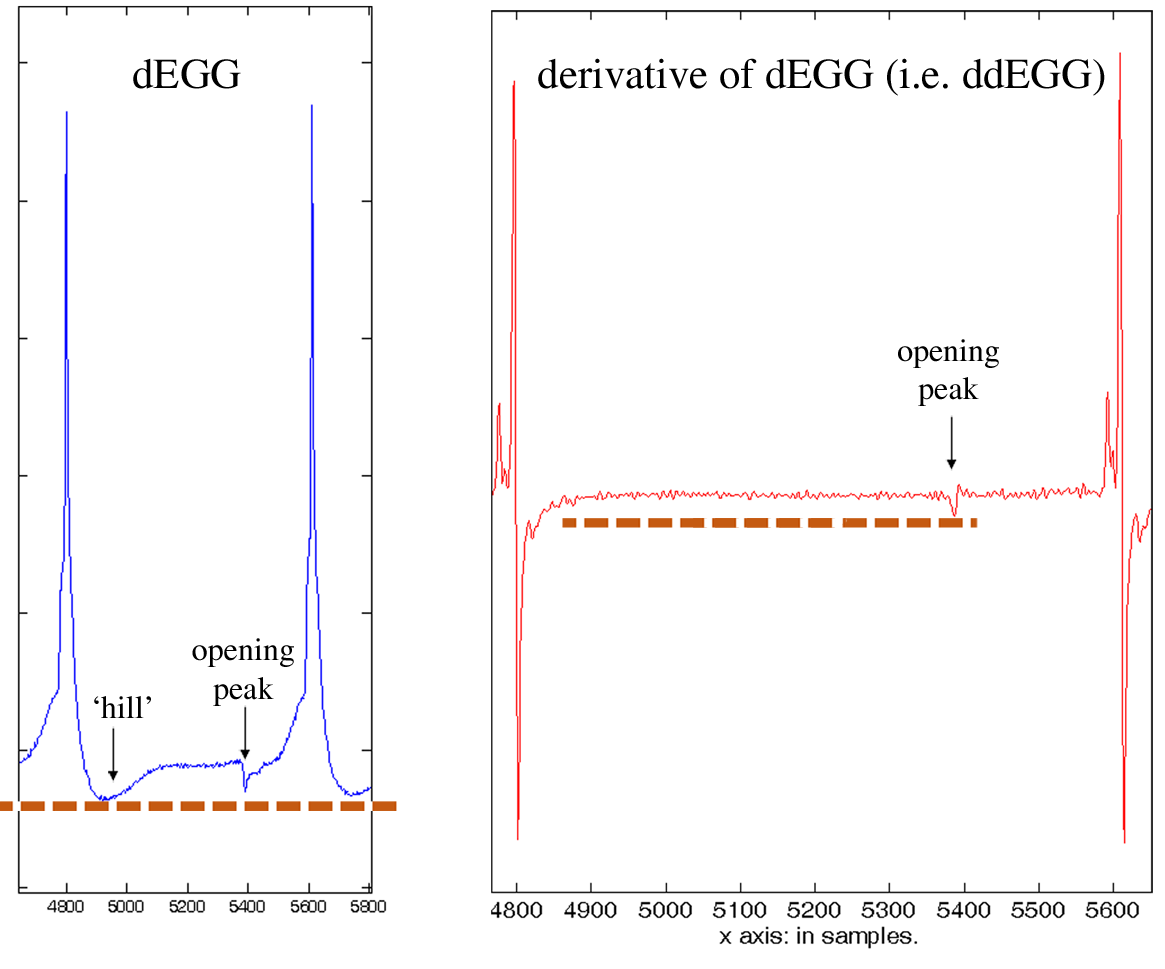
<style>
.page{position:relative;width:1165px;height:969px;background:#ffffff}
.page>*{position:absolute;margin:0}
.t1{font:42.7px "Times-Roman";color:#000000}
.t2{font:32px "Times-Roman";color:#000000}
</style>
<div class="page">
<p class="t1" style="left:133px;top:58px;width:108px;height:31px">dEGG</p>
<p class="t1" style="left:538px;top:58px;width:567px;height:38px">derivative of dEGG (i.e. ddEGG)</p>
<p class="t2" style="left:898px;top:339px;width:101px;height:67px;text-align:center">opening<br>peak</p>
<p class="t2" style="left:192px;top:638px;width:102px;height:68px;text-align:center">opening<br>peak</p>
<p class="t2" style="left:94px;top:696px;width:57px;height:22px">‘hill’</p>
</div>
